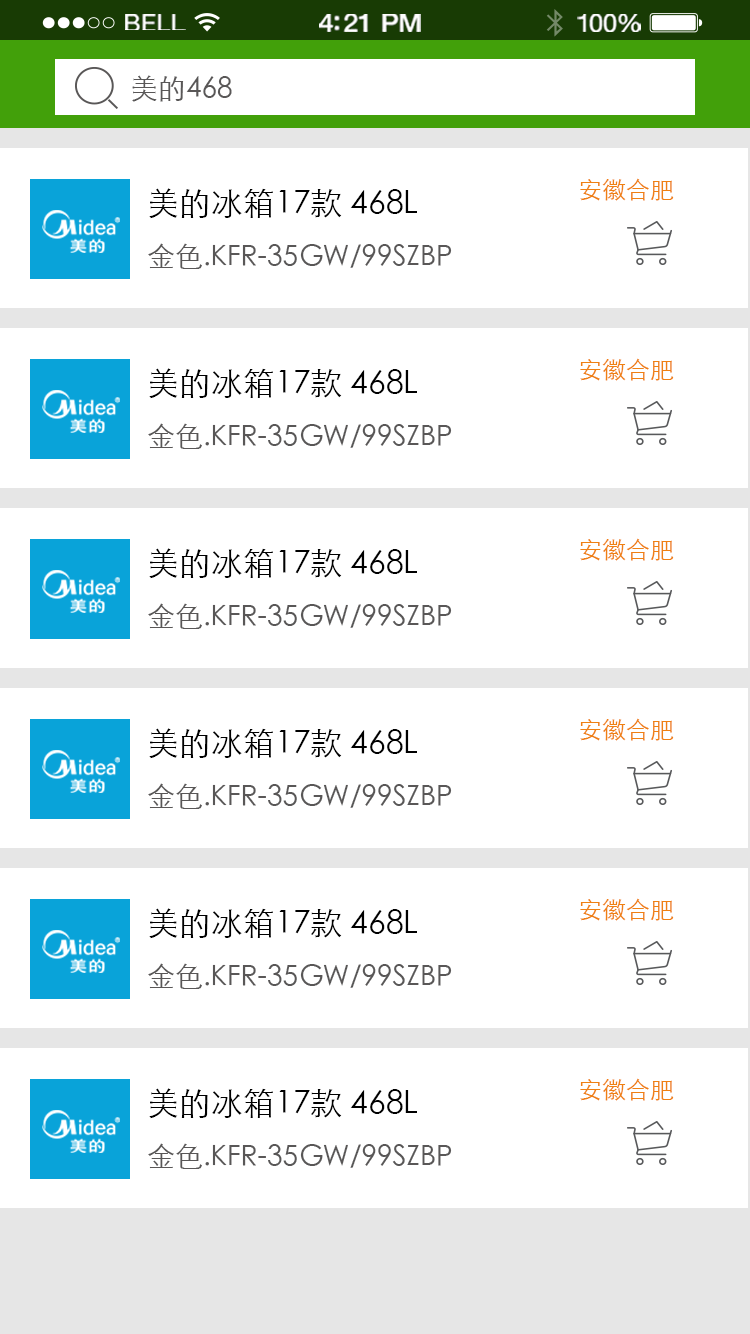
<style>
.page{position:relative;width:750px;height:1334px;background:#ffffff}
.page>*{position:absolute;margin:0}
.t1{font:23.3px "HelveticaNeue";letter-spacing:0.02em;color:#ffffff;scale:1.06 1}
.t2{font:25.3px "HelveticaNeue-Medium";letter-spacing:-0.02em;color:#ffffff;scale:1.06 1}
.t3{font:24.3px "HelveticaNeue";letter-spacing:-0.02em;color:#ffffff;scale:1.06 1}
.t4{font:28px "STXihei";color:#595757}
.t5{font:24px "STXihei";color:#ef8013}
.t6{font:28px/56px "STXihei";color:#595757}
.t7{font:32px/56px "STXihei";color:#000000}
</style>
<div class="page">
<p class="t1" style="left:125px;top:14px;width:61px;height:16px">BELL</p>
<p class="t2" style="left:319px;top:14px;width:102px;height:18px">4:21 PM</p>
<p class="t3" style="left:577px;top:14px;width:64px;height:18px">100%</p>
<p class="t4" style="left:132px;top:75px;width:100px;height:27px">美的468</p>
<p class="t5" style="left:580px;top:178px;width:94px;height:23px">安徽合肥</p>
<p class="t6" style="left:148px;top:188px;width:304px;height:81px"><span class="t7">美的冰箱17款 468L <br></span>金色.KFR-35GW/99SZBP</p>
<p class="t5" style="left:580px;top:358px;width:94px;height:23px">安徽合肥</p>
<p class="t6" style="left:148px;top:368px;width:304px;height:81px"><span class="t7">美的冰箱17款 468L <br></span>金色.KFR-35GW/99SZBP</p>
<p class="t5" style="left:580px;top:538px;width:94px;height:23px">安徽合肥</p>
<p class="t6" style="left:148px;top:548px;width:304px;height:81px"><span class="t7">美的冰箱17款 468L <br></span>金色.KFR-35GW/99SZBP</p>
<p class="t5" style="left:580px;top:718px;width:94px;height:23px">安徽合肥</p>
<p class="t6" style="left:148px;top:728px;width:304px;height:81px"><span class="t7">美的冰箱17款 468L <br></span>金色.KFR-35GW/99SZBP</p>
<p class="t5" style="left:580px;top:898px;width:94px;height:23px">安徽合肥</p>
<p class="t6" style="left:148px;top:908px;width:304px;height:81px"><span class="t7">美的冰箱17款 468L <br></span>金色.KFR-35GW/99SZBP</p>
<p class="t5" style="left:580px;top:1078px;width:94px;height:23px">安徽合肥</p>
<p class="t6" style="left:148px;top:1088px;width:304px;height:81px"><span class="t7">美的冰箱17款 468L <br></span>金色.KFR-35GW/99SZBP</p>
</div>
